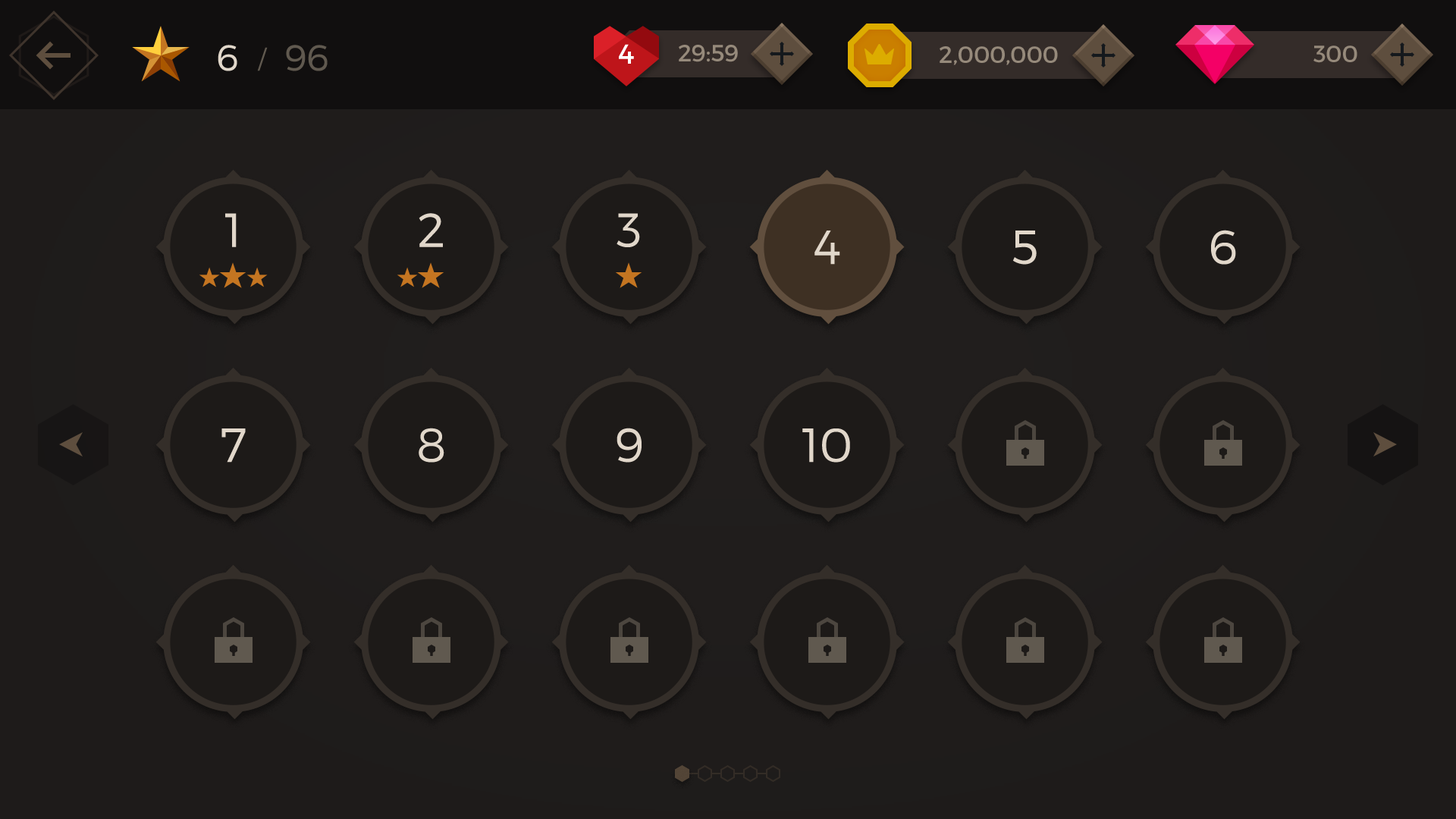
<style>
.page{position:relative;width:1456px;height:819px}
.page>*{position:absolute;margin:0}
.t1{font:36.4px "Montserrat-Light";color:#e1d7ca;text-transform:uppercase}
.t2{font:24.3px "Montserrat-Light";color:#60594f;text-transform:uppercase}
.t3{font:36.4px "Montserrat-Light";color:#60594f;text-transform:uppercase}
.t4{font:27.3px "Montserrat-Regular";color:#ffffff}
.t5{font:23.5px "Montserrat-Regular";color:#aea190}
.t6{font:47.8px "Montserrat-Light";color:#e1d7ca;text-transform:uppercase}
</style>
<div class="page">
<p class="t1" style="left:218px;top:45px;width:19px;height:26px">6</p>
<p class="t2" style="left:257px;top:47px;width:11px;height:24px">/</p>
<p class="t3" style="left:286px;top:45px;width:42px;height:26px">96</p>
<p class="t4" style="left:619px;top:44px;width:15px;height:20px">4</p>
<p class="t5" style="left:679px;top:45px;width:59px;height:17px;opacity:0.8">29:59</p>
<p class="t5" style="left:940px;top:46px;width:118px;height:19px;opacity:0.8">2,000,000</p>
<p class="t5" style="left:1313px;top:45px;width:44px;height:18px;opacity:0.8">300</p>
<p class="t6" style="left:225px;top:213px;width:12px;height:34px">1</p>
<p class="t6" style="left:419px;top:213px;width:24px;height:34px">2</p>
<p class="t6" style="left:617px;top:213px;width:23px;height:34px">3</p>
<p class="t6" style="left:814px;top:231px;width:26px;height:34px">4</p>
<p class="t6" style="left:1012px;top:231px;width:25px;height:34px">5</p>
<p class="t6" style="left:1211px;top:230px;width:25px;height:35px">6</p>
<p class="t6" style="left:221px;top:428px;width:25px;height:35px">7</p>
<p class="t6" style="left:419px;top:428px;width:25px;height:35px">8</p>
<p class="t6" style="left:617px;top:428px;width:25px;height:35px">9</p>
<p class="t6" style="left:802px;top:428px;width:48px;height:35px">10</p>
</div>
